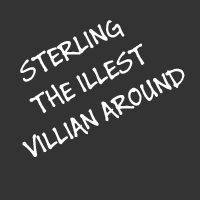
<style>
.page{position:relative;width:200px;height:200px;background:#333333}
.page>*{position:absolute;margin:0}
.t1{font:30px "BuxtonSketch";color:#ffffff}
</style>
<div class="page">
<p class="t1" style="left:20px;top:20px;width:165px;height:137px;text-align:center;rotate:-26deg">STERLING<br> THE ILLEST<br> VILLIAN AROUND</p>
</div>
